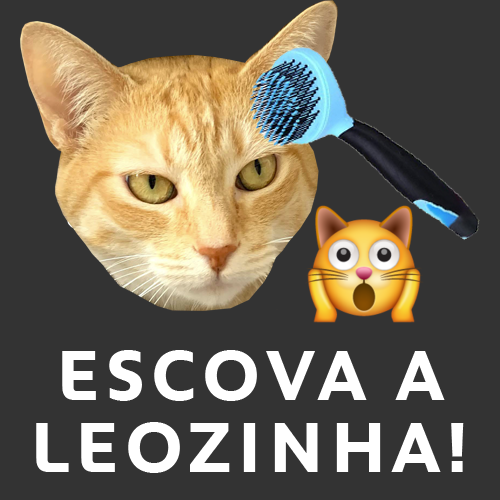
<style>
.page{position:relative;width:500px;height:500px;background:#333333}
.page>*{position:absolute;margin:0}
.t1{font:72px/72px "Peugeot-Bold";letter-spacing:0.075em;color:#ffffff;text-transform:uppercase}
</style>
<div class="page">
<p class="t1" style="left:36px;top:350px;width:428px;height:123px;text-align:center">escova a<br>leozinha!</p>
</div>
